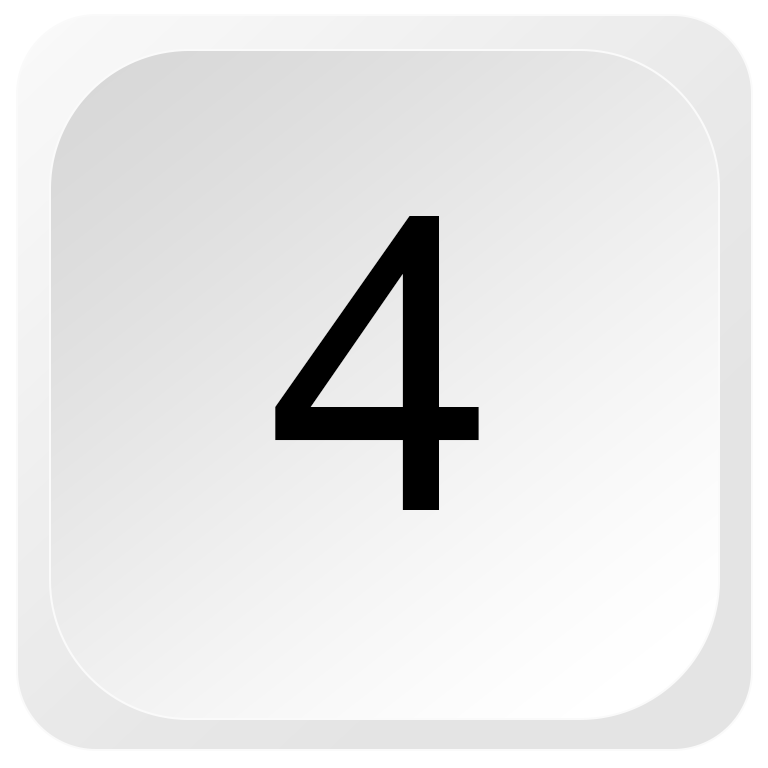
<style>
.page{position:relative;width:768px;height:768px}
.page>*{position:absolute;margin:0}
.t1{font:411px "ArialMT";color:#000000}
</style>
<div class="page">
<p class="t1" style="left:275px;top:216px;width:204px;height:294px">4</p>
</div>
